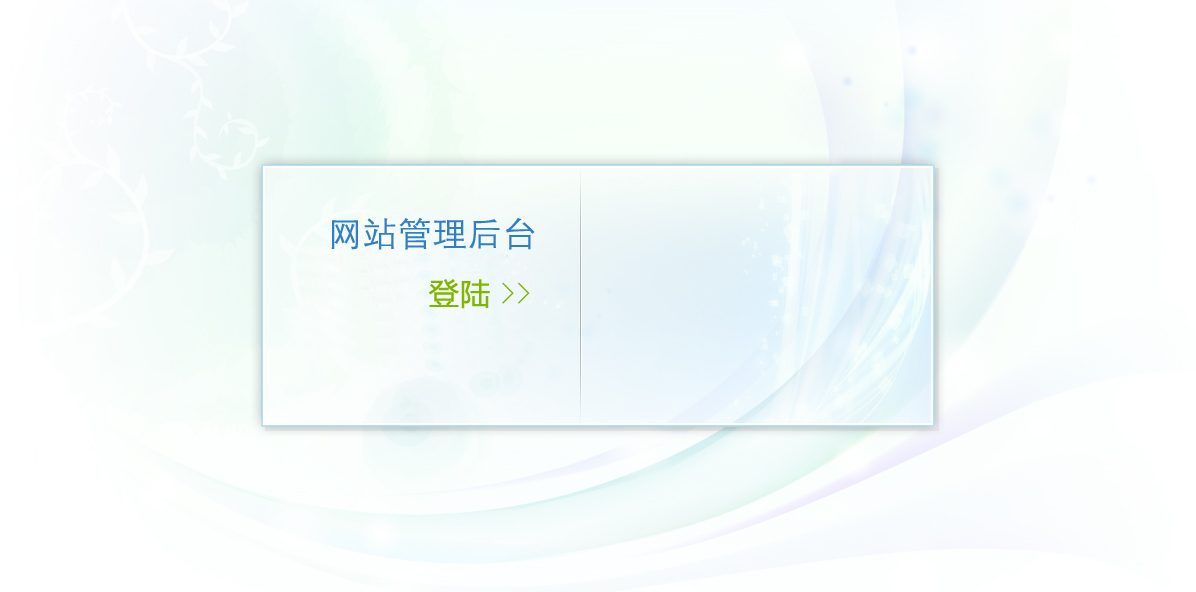
<style>
.page{position:relative;width:1196px;height:592px}
.page>*{position:absolute;margin:0}
.t1{font:34px "STXihei";color:#317fc3;font-weight:bold}
.t2{font:30px "MicrosoftYaHei";color:#80b600;font-weight:bold}
.t3{font:30px "SimSun";color:#80b600;font-weight:bold}
</style>
<div class="page">
<p class="t1" style="left:331px;top:217px;width:204px;height:33px">网站管理后台</p>
<p class="t2" style="left:429px;top:279px;width:101px;height:30px">登陆 <span class="t3">&gt;&gt;</span></p>
</div>
